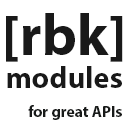
<style>
.page{position:relative;width:128px;height:128px;background:#ffffff}
.page>*{position:absolute;margin:0}
.t1{font:57.6px "MyriadPro-Bold";color:#191919}
.t2{font:30.3px "MyriadPro-Bold";color:#191919}
.t3{font:15.6px "MyriadPro-Bold";color:#181a19}
</style>
<div class="page">
<p class="t1" style="left:6px;top:13px;width:117px;height:49px">[rbk]</p>
<p class="t2" style="left:7px;top:66px;width:115px;height:22px">modules</p>
<p class="t3" style="left:28px;top:105px;width:94px;height:15px">for great APIs</p>
</div>
